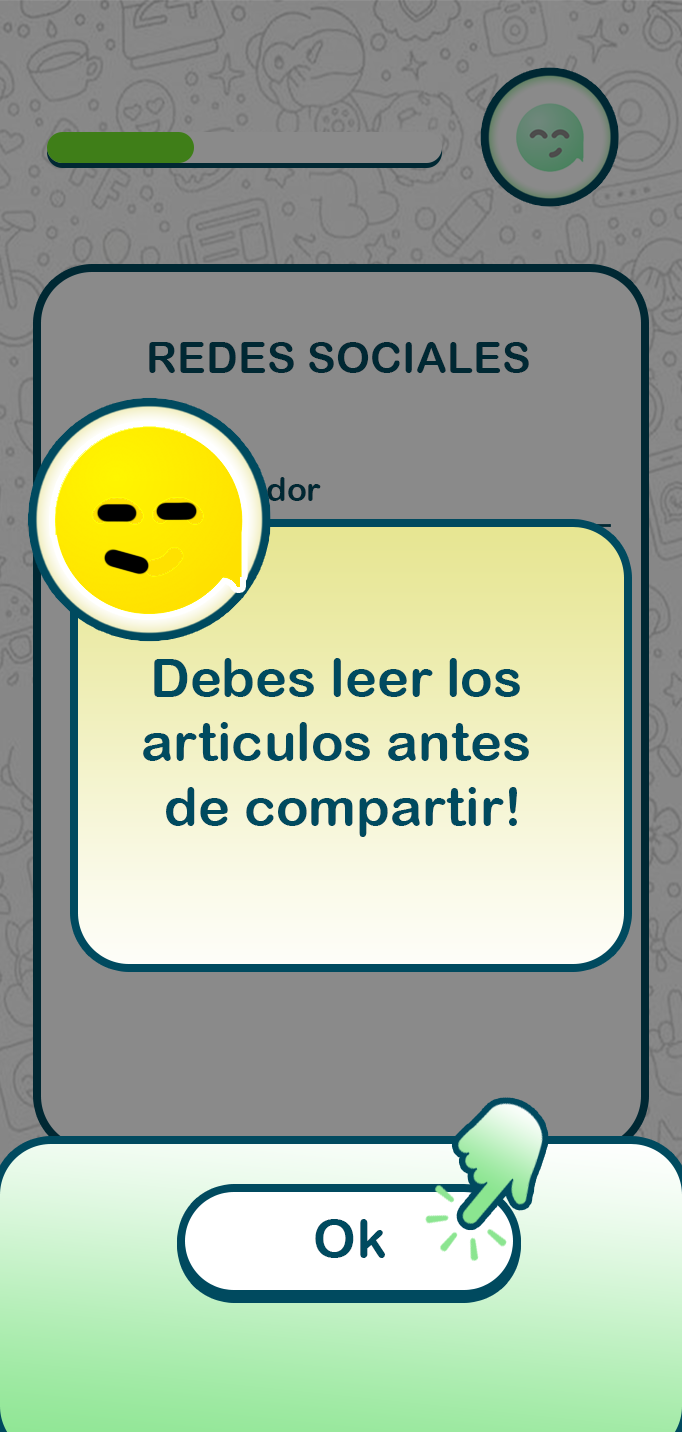
<style>
.page{position:relative;width:682px;height:1432px;background:#8a8a8a}
.page>*{position:absolute;margin:0}
.t1{font:43.4px "ArialRoundedMTBold";color:#002833}
.t2{font:54px "ArialRoundedMTBold";color:#004a5f}
</style>
<div class="page">
<p class="t1" style="left:149px;top:342px;width:380px;height:31px">REDES SOCIALES</p>
<p class="t2" style="left:143px;top:658px;width:386px;height:179px;text-align:center">Debes leer los <br>articulos antes <br>de compartir!</p>
<p class="t2" style="left:315px;top:1219px;width:70px;height:39px">Ok</p>
</div>
